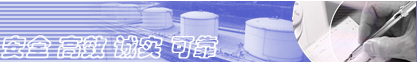
<style>
.page{position:relative;width:417px;height:62px}
.page>*{position:absolute;margin:0}
.t1{font:24px "STCaiyun";color:#fefefe;font-weight:bold;font-style:italic}
</style>
<div class="page">
<p class="t1" style="left:1px;top:35px;width:218px;height:24px">安全 高效 诚实 可靠</p>
</div>
